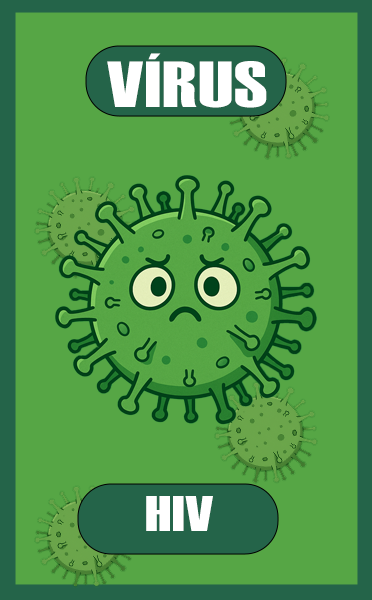
<style>
.page{position:relative;width:372px;height:600px;background:#56a645}
.page>*{position:absolute;margin:0}
.t1{font:65px "Haettenschweiler";letter-spacing:0.015em;color:#ffffff;scale:1.35 1}
.t2{font:50px "Haettenschweiler";letter-spacing:0.015em;color:#ffffff;scale:1.35 1}
</style>
<div class="page">
<p class="t1" style="left:107px;top:53px;width:160px;height:55px">VÍRUS</p>
<p class="t2" style="left:146px;top:496px;width:67px;height:35px">HIV</p>
</div>
